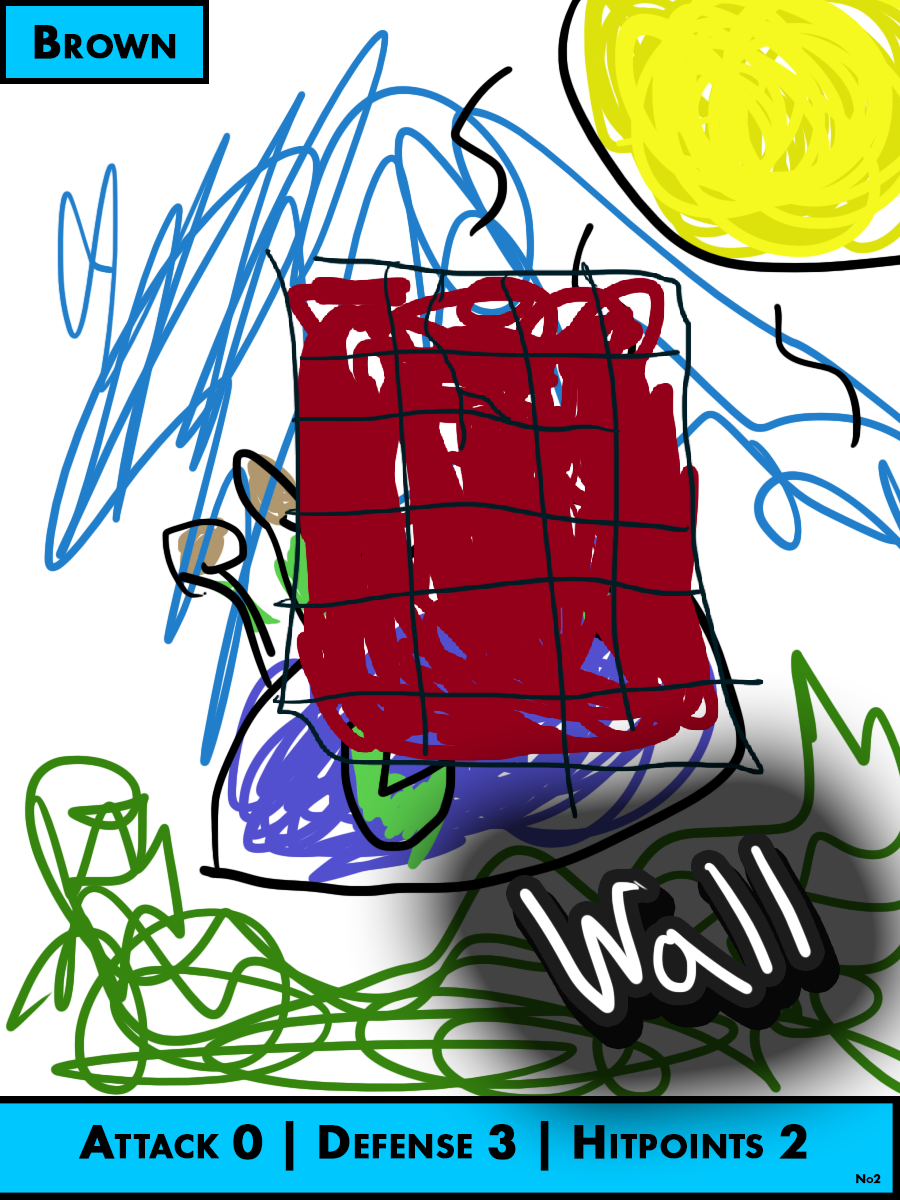
<style>
.page{position:relative;width:900px;height:1200px;background:#ffffff}
.page>*{position:absolute;margin:0}
.t1{font:50px "FuturaPT-Heavy";color:#000000;font-variant:small-caps;font-weight:bold}
.t2{font:12.5px "FuturaPT-Heavy";color:#000000;font-variant:small-caps;font-weight:bold}
</style>
<div class="page">
<p class="t1" style="left:34px;top:25px;width:142px;height:34px">Brown</p>
<p class="t1" style="left:79px;top:1121px;width:728px;height:50px">Attack 0 | Defense 3 | Hitpoints 2</p>
<p class="t2" style="left:856px;top:1174px;width:25px;height:10px">No2</p>
</div>
